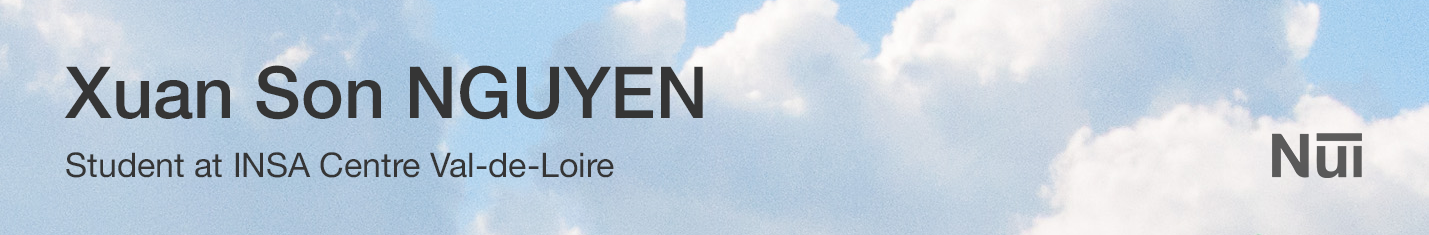
<style>
.page{position:relative;width:1429px;height:235px}
.page>*{position:absolute;margin:0}
.t1{font:71.8px "HelveticaNeue-Medium";color:#353535}
.t2{font:33.9px "HelveticaNeue";color:#353535}
</style>
<div class="page">
<p class="t1" style="left:64px;top:65px;width:639px;height:55px">Xuan Son NGUYEN</p>
<p class="t2" style="left:66px;top:152px;width:548px;height:26px">Student at INSA Centre Val-de-Loire</p>
</div>
